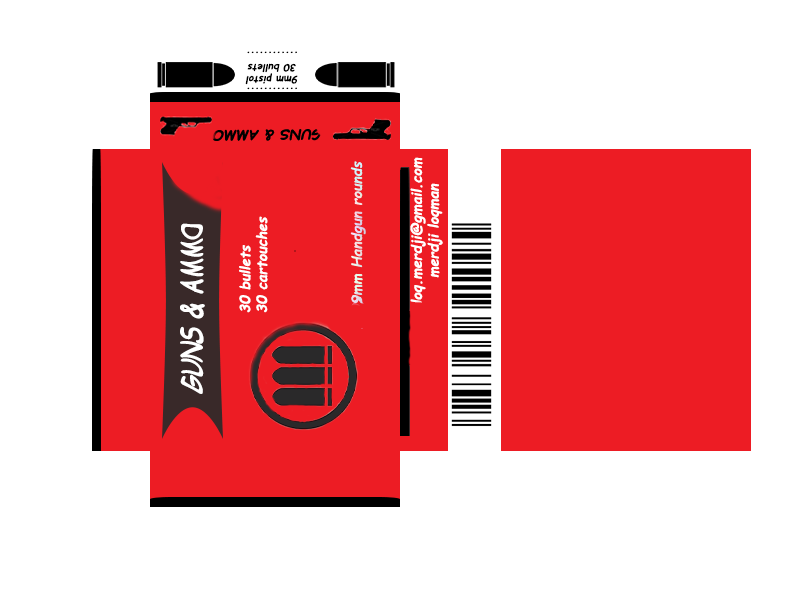
<style>
.page{position:relative;width:800px;height:600px;background:#ffffff}
.page>*{position:absolute;margin:0}
.t1{font:10px "ComicSansMS-Bold";color:#000000;font-style:italic}
.t2{font:14px "ComicSansMS-Bold";color:#ffffff;font-style:italic}
.t3{font:27px "ComicSansMS-Bold";color:#ffffff;font-style:italic;scale:0.89 1}
</style>
<div class="page">
<p class="t1" style="left:245px;top:51px;width:53px;height:39px;text-align:center;rotate:180deg">............<br>9mm pistol <br>30 bullets<br>............</p>
<p class="t2" style="left:410px;top:157px;width:33px;height:147px;text-align:center;rotate:-90deg">loq.merdji@gmail.com<br>merdji loqman</p>
<p class="t2" style="left:239px;top:216px;width:29px;height:97px;text-align:right;rotate:-90deg">30 bullets<br>30 cartouches</p>
<p class="t3" style="left:180px;top:223px;width:25px;height:171px;rotate:-90deg">GUNS &amp; AMMO</p>
</div>
